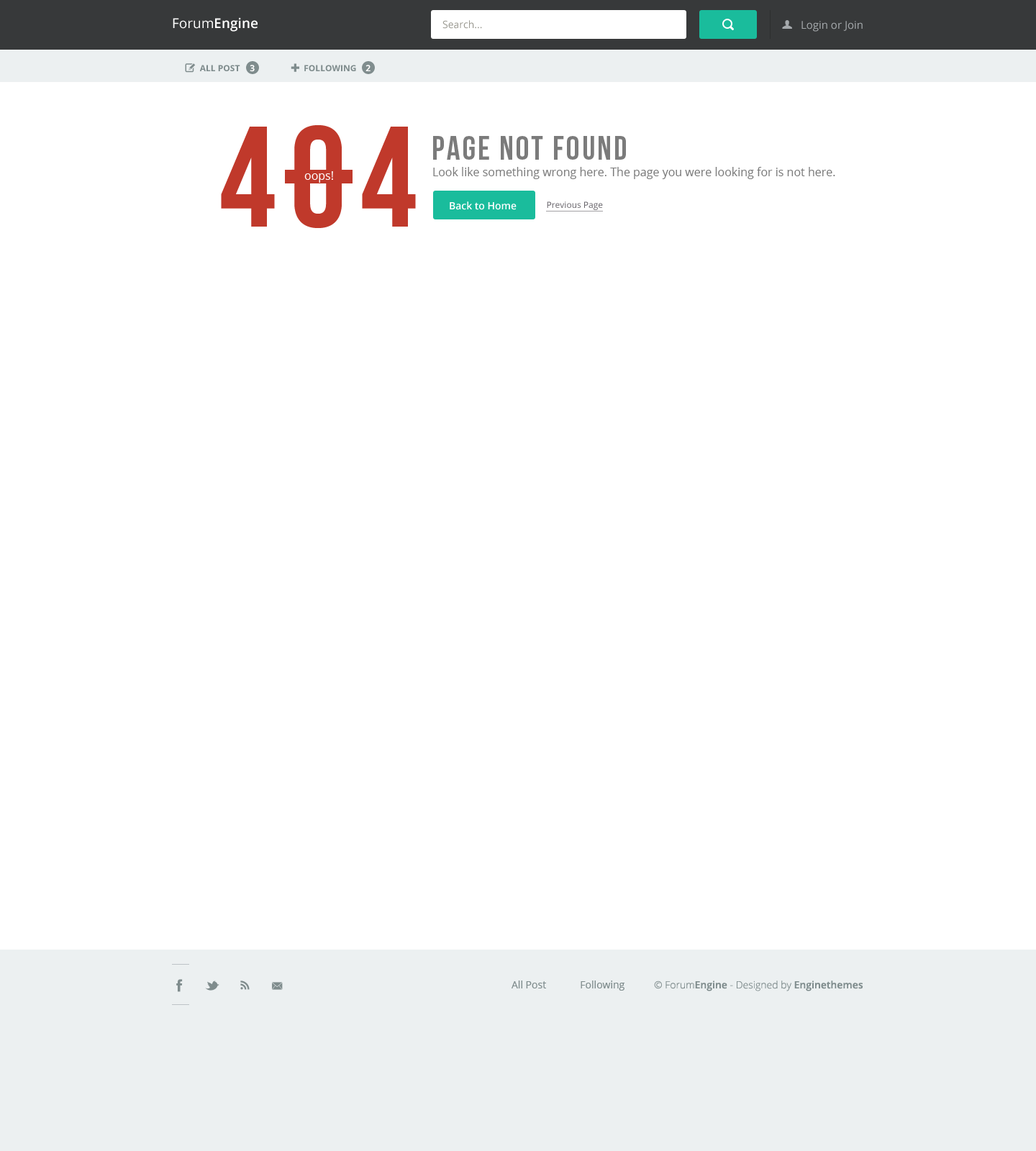
<style>
.page{position:relative;width:1036px;height:1151px;background:#ffffff}
.page>*{position:absolute;margin:0}
.t1{font:13.7px "OpenSans-Semibold";color:#ffffff}
.t2{font:13.7px "OpenSans";color:#ffffff}
.t3{font:10.1px "OpenSans";color:#9a9991}
.t4{font:11.5px "PictosRIP";color:#a5a9ac}
.t5{font:10.8px "OpenSans";color:#a5a9ac}
.t6{font:8.6px "OpenSans-Bold";color:#7f8c8d}
.t7{font:11.5px "PictosRIP";color:#7f8c8d}
.t8{font:8.6px "OpenSans-Semibold";color:#ffffff;text-transform:uppercase}
.t9{font:142.4px "BebasNeue";letter-spacing:0.1em;color:#c0392b}
.t10{font:33.1px "BebasNeue";letter-spacing:0.07em;color:#7b7b7b}
.t11{font:11.5px "OpenSans";color:#ffffff}
.t12{font:11.5px "OpenSans";color:#7b7b7b}
.t13{font:10.1px "OpenSans-Semibold";color:#ffffff}
.t14{font:8.6px "OpenSans";color:#656268}
.t15{font:10.1px "OpenSans";color:#7f8c8d}
.t16{font:10.1px "OpenSans-Light";color:#7f8c8d}
.t17{font:10.1px "OpenSans-Semibold";color:#7f8c8d}
</style>
<div class="page">
<p class="t1" style="left:173px;top:17px;width:85px;height:15px"><span class="t2">Forum</span>Engine</p>
<p class="t3" style="left:442px;top:20px;width:40px;height:9px">Search...</p>
<p class="t4" style="left:782px;top:20px;width:10px;height:9px">U</p>
<p class="t5" style="left:801px;top:21px;width:62px;height:11px">Login or Join</p>
<p class="t6" style="left:185px;top:63px;width:55px;height:10px"><span class="t7">W </span>ALL POST</p>
<p class="t8" style="left:250px;top:65px;width:5px;height:7px">3</p>
<p class="t6" style="left:291px;top:63px;width:65px;height:9px"><span class="t7">&amp; </span>FOLLOWING</p>
<p class="t8" style="left:365px;top:65px;width:5px;height:6px">2</p>
<p class="t9" style="left:221px;top:125px;width:195px;height:103px">404</p>
<p class="t10" style="left:433px;top:136px;width:193px;height:24px">page not found</p>
<p class="t11" style="left:304px;top:171px;width:29px;height:12px">oops!</p>
<p class="t12" style="left:433px;top:167px;width:402px;height:12px">Look like something wrong here. The page you were looking for is not here.</p>
<p class="t13" style="left:450px;top:201px;width:67px;height:9px">Back to Home</p>
<p class="t14" style="left:547px;top:201px;width:56px;height:9px">Previous Page</p>
<p class="t15" style="left:511px;top:981px;width:113px;height:10px">All Post             Following</p>
<p class="t16" style="left:654px;top:981px;width:209px;height:10px">© Forum<span class="t17">Engine</span> - Designed by <span class="t17">Enginethemes</span></p>
</div>
